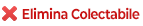
<style>
.page{position:relative;width:143px;height:26px;background:#ffffff}
.page>*{position:absolute;margin:0}
.t1{font:14.3px "Montserrat-Bold";letter-spacing:-0.04em;color:#ca1414;scale:0.88 1}
</style>
<div class="page">
<p class="t1" style="left:22px;top:7px;width:118px;height:13px">Elimina Colectabile</p>
</div>
